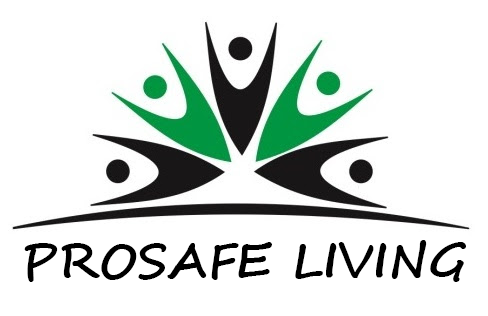
<style>
.page{position:relative;width:488px;height:316px;background:#ffffff}
.page>*{position:absolute;margin:0}
.t1{font:48px "SegoeScript-Bold";color:#000000}
</style>
<div class="page">
<p class="t1" style="left:24px;top:240px;width:442px;height:42px">PROSAFE LIVING</p>
</div>
